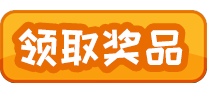
<style>
.page{position:relative;width:207px;height:90px;background:#ffffff}
.page>*{position:absolute;margin:0}
.t1{font:43.2px "HappyZcool-2016";letter-spacing:-0.05em;color:#ffffff;font-weight:bold}
</style>
<div class="page">
<p class="t1" style="left:18px;top:28px;width:165px;height:39px">领取奖品</p>
</div>
